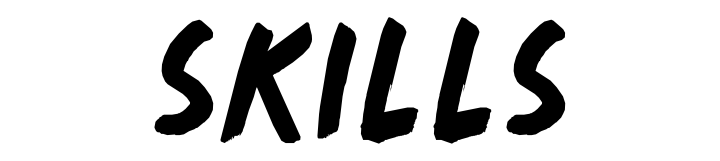
<style>
.page{position:relative;width:720px;height:161px;background:#ffffff}
.page>*{position:absolute;margin:0}
.t1{font:155.4px "DKDropDeadGorgeous";letter-spacing:0.1em;color:#000000;scale:0.75 1}
</style>
<div class="page">
<p class="t1" style="left:154px;top:17px;width:412px;height:127px">SKILLS</p>
</div>
